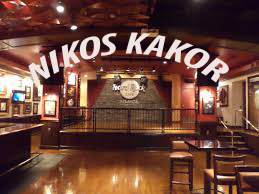
<style>
.page{position:relative;width:259px;height:194px}
.page>*{position:absolute;margin:0}
.t1{font:30px "MyriadPro-BoldCondIt";color:#f1e5e4}
</style>
<div class="page">
<p class="t1" style="left:28px;top:32px;width:201px;height:55px">NIKOS KAKOR</p>
</div>
